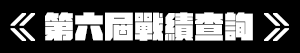
<style>
.page{position:relative;width:300px;height:53px;background:#000000}
.page>*{position:absolute;margin:0}
.t1{font:30px "burnfont-1.1-Black";color:#ffffff;text-transform:uppercase}
</style>
<div class="page">
<p class="t1" style="left:45px;top:12px;width:208px;height:29px">第六屆戰績查詢</p>
</div>
